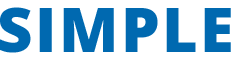
<style>
.page{position:relative;width:250px;height:60px;background:#ffffff}
.page>*{position:absolute;margin:0}
.t1{font:61.6px "OpenSans-Extrabold";letter-spacing:0.04em;color:#0069b0;text-transform:uppercase}
</style>
<div class="page">
<p class="t1" style="left:0px;top:7px;width:231px;height:46px">simple</p>
</div>
